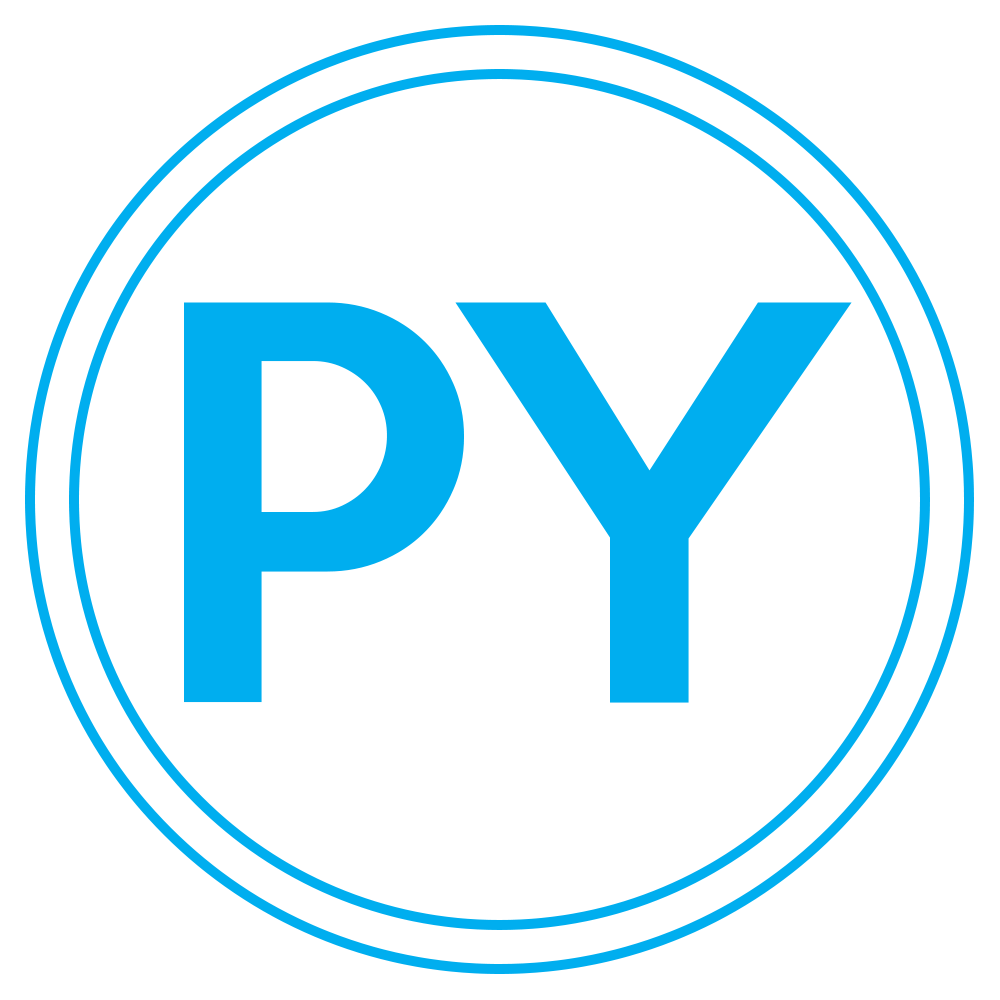
<style>
.page{position:relative;width:1000px;height:1000px;background:#ffffff}
.page>*{position:absolute;margin:0}
.t1{font:500px "KeepCalm-Medium";color:#00aeef}
</style>
<div class="page">
<p class="t1" style="left:184px;top:302px;width:668px;height:401px">PY</p>
</div>
